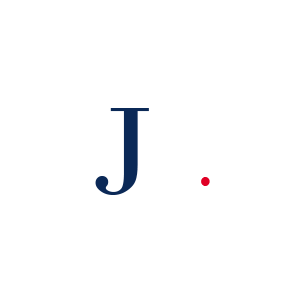
<style>
.page{position:relative;width:305px;height:305px;background:#ffffff}
.page>*{position:absolute;margin:0}
.t1{font:116.7px "BodoniMT";color:#0b2957}
.t2{font:75px "BookAntiqua";color:#ffffff}
.t3{font:75px "BookAntiqua";color:#e00025}
</style>
<div class="page">
<p class="t1" style="left:95px;top:108px;width:115px;height:87px">J<span class="t2">b</span><span class="t3">.</span></p>
</div>
